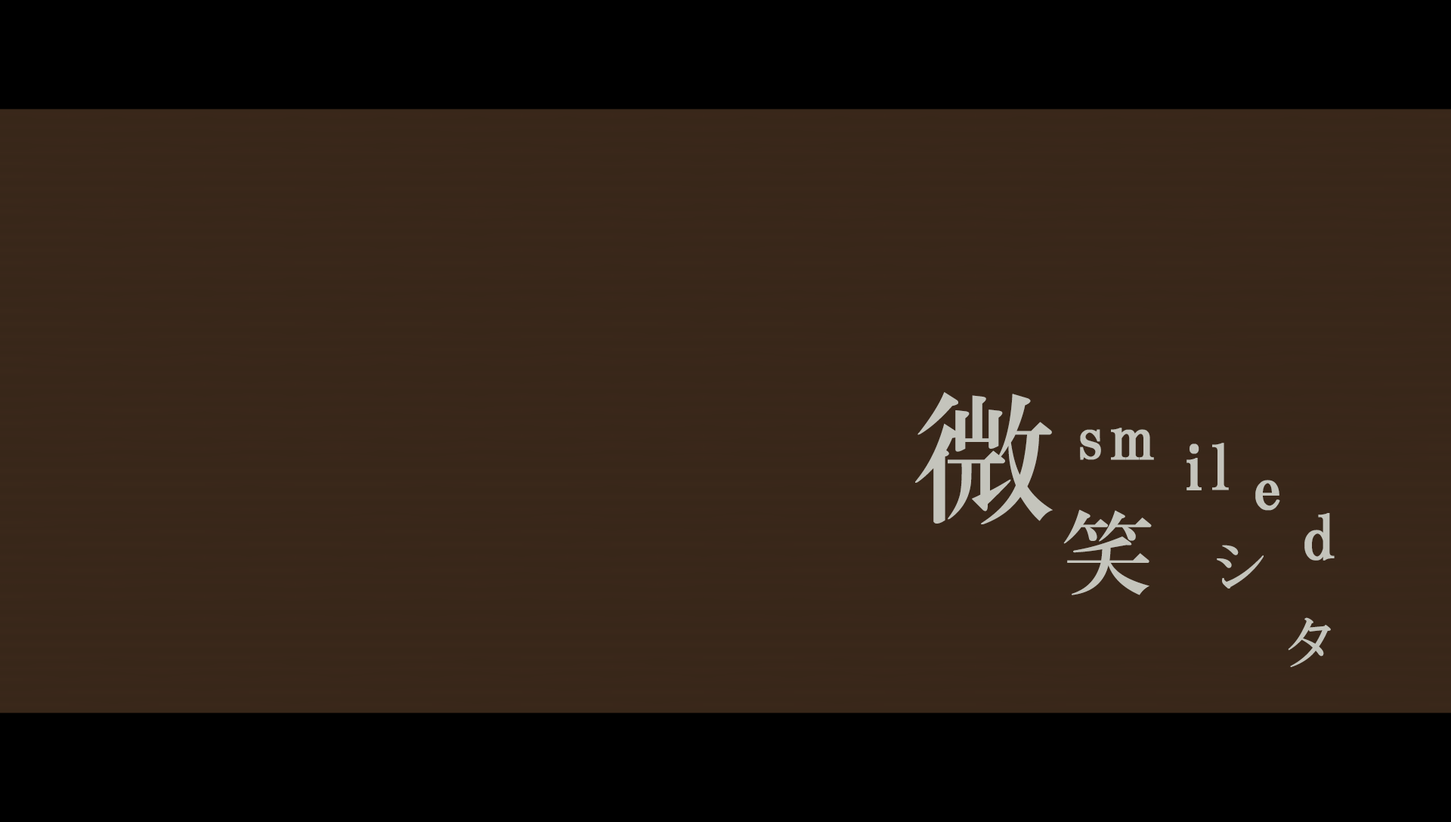
<style>
.page{position:relative;width:1451px;height:822px;background:#39271a}
.page>*{position:absolute;margin:0}
.t1{font:144.3px "HGMinchoB";letter-spacing:0.12em;color:#c4c4bc}
.t2{font:60.4px/52.1px "HGPMinchoB";letter-spacing:0.1em;color:#c4c4bc;font-weight:bold}
.t3{font:91.4px "HGMinchoB";letter-spacing:0.12em;color:#c4c4bc}
.t4{font:55.9px "HGMinchoB";letter-spacing:0.12em;color:#c4c4bc}
</style>
<div class="page">
<p class="t1" style="left:915px;top:392px;width:137px;height:132px">微</p>
<p class="t2" style="left:1080px;top:428px;width:254px;height:133px">sm il e d</p>
<p class="t3" style="left:1063px;top:509px;width:88px;height:86px">笑</p>
<p class="t4" style="left:1216px;top:545px;width:47px;height:44px">シ</p>
<p class="t4" style="left:1287px;top:617px;width:43px;height:50px">タ</p>
</div>
